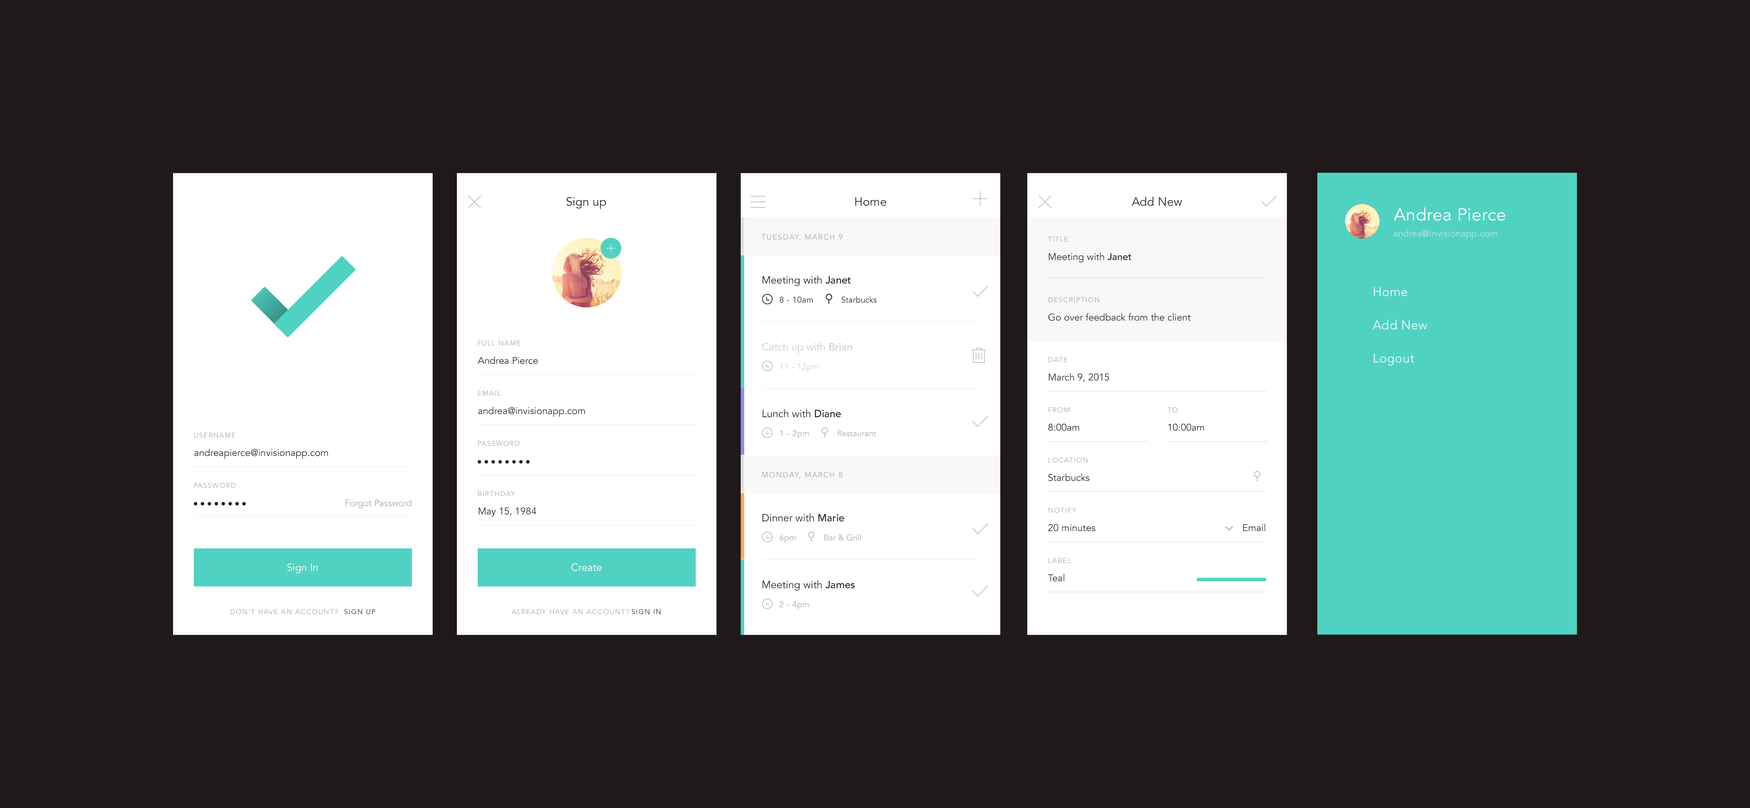
<style>
.page{position:relative;width:1750px;height:808px;background:#201919}
.page>*{position:absolute;margin:0}
.t1{font:11.8px "Avenir-Book";color:#1d1d26}
.t2{font:11.8px "Avenir-Book";letter-spacing:0.01em;color:#1d1d26}
.t3{font:17.3px "Avenir-Book";letter-spacing:0.02em;color:#ffffff}
.t4{font:9px "Avenir-Book";letter-spacing:0.02em;color:#b5e9e2}
.t5{font:7.6px "Avenir-Book";letter-spacing:0.1em;color:#a3a3a5}
.t6{font:6.9px "Avenir-Book";letter-spacing:0.1em;color:#a3a3a6}
.t7{font:9.7px "Avenir-Book";color:#1d1d26}
.t8{font:9.7px "Avenir-Medium";color:#1d1d26}
.t9{font:10.4px "Avenir-Book";color:#1d1d26}
.t10{font:10.4px "Avenir-Medium";color:#1d1d26}
.t11{font:12.5px "Avenir-Light";letter-spacing:0.03em;color:#ffffff}
.t12{font:8.3px "Avenir-Book";letter-spacing:0.03em;color:#1d1d26}
.t13{font:8.3px "Avenir-Book";color:#1d1d26}
.t14{font:6.9px "Avenir-Book";letter-spacing:0.1em;color:#a8a8aa}
.t15{font:10.4px "Avenir-Book";color:#cdcdce}
.t16{font:10.4px "Avenir-Medium";color:#cdcdce}
.t17{font:8.3px "Avenir-Book";letter-spacing:0.03em;color:#cdcdce}
.t18{font:8.3px "Avenir-Book";letter-spacing:0.03em;color:#a8a8aa}
.t19{font:8.3px "Avenir-Book";color:#a8a8aa}
.t20{font:9px "Avenir-Book";color:#a8a8aa}
.t21{font:10.4px "Avenir-Book";color:#ffffff}
.t22{font:6.9px "Avenir-Book";letter-spacing:0.1em;color:#1d1d26}
</style>
<div class="page">
<p class="t1" style="left:566px;top:197px;width:40px;height:12px">Sign up</p>
<p class="t2" style="left:855px;top:197px;width:31px;height:9px">Home</p>
<p class="t2" style="left:1132px;top:197px;width:50px;height:9px">Add New</p>
<p class="t3" style="left:1394px;top:207px;width:111px;height:14px">Andrea Pierce</p>
<p class="t4" style="left:1394px;top:230px;width:103px;height:9px">andrea@invisionapp.com</p>
<p class="t5" style="left:762px;top:234px;width:81px;height:7px">TUESDAY, MARCH 9</p>
<p class="t6" style="left:1048px;top:236px;width:20px;height:6px">TITLE</p>
<p class="t7" style="left:1049px;top:252px;width:82px;height:10px">Meeting with <span class="t8">Janet</span></p>
<p class="t9" style="left:763px;top:276px;width:88px;height:10px">Meeting with <span class="t10">Janet</span></p>
<p class="t11" style="left:1374px;top:287px;width:33px;height:9px">Home</p>
<p class="t12" style="left:780px;top:296px;width:33px;height:7px">8 - 10am</p>
<p class="t13" style="left:842px;top:296px;width:35px;height:7px">Starbucks</p>
<p class="t6" style="left:1048px;top:297px;width:51px;height:6px">DESCRIPTION</p>
<p class="t7" style="left:1048px;top:313px;width:143px;height:8px">Go over feedback from the client</p>
<p class="t11" style="left:1373px;top:320px;width:54px;height:10px">Add New</p>
<p class="t14" style="left:478px;top:340px;width:43px;height:6px">FULL NAME</p>
<p class="t15" style="left:762px;top:342px;width:90px;height:11px">Catch up with <span class="t16">Brian</span></p>
<p class="t11" style="left:1374px;top:353px;width:40px;height:13px">Logout</p>
<p class="t7" style="left:478px;top:356px;width:60px;height:8px">Andrea Pierce</p>
<p class="t17" style="left:780px;top:363px;width:39px;height:9px">11 - 12pm</p>
<p class="t14" style="left:1048px;top:357px;width:20px;height:5px">DATE</p>
<p class="t7" style="left:1049px;top:373px;width:60px;height:9px">March 9, 2015</p>
<p class="t14" style="left:478px;top:390px;width:23px;height:6px">EMAIL</p>
<p class="t7" style="left:478px;top:406px;width:107px;height:11px">andrea@invisionapp.com</p>
<p class="t9" style="left:763px;top:409px;width:78px;height:8px">Lunch with <span class="t10">Diane</span></p>
<p class="t14" style="left:1048px;top:407px;width:22px;height:6px">FROM</p>
<p class="t14" style="left:1168px;top:407px;width:10px;height:6px">TO</p>
<p class="t7" style="left:1048px;top:423px;width:31px;height:8px">8:00am</p>
<p class="t7" style="left:1168px;top:423px;width:36px;height:8px">10:00am</p>
<p class="t14" style="left:194px;top:432px;width:41px;height:6px">USERNAME</p>
<p class="t18" style="left:780px;top:430px;width:29px;height:9px">1 - 2pm</p>
<p class="t19" style="left:838px;top:430px;width:38px;height:6px">Restaurant</p>
<p class="t7" style="left:194px;top:448px;width:134px;height:11px">andreapierce@invisionapp.com</p>
<p class="t14" style="left:478px;top:441px;width:42px;height:5px">PASSWORD</p>
<p class="t14" style="left:1048px;top:457px;width:40px;height:6px">LOCATION</p>
<p class="t5" style="left:762px;top:472px;width:81px;height:7px">MONDAY, MARCH 8</p>
<p class="t7" style="left:1048px;top:473px;width:41px;height:8px">Starbucks</p>
<p class="t14" style="left:194px;top:483px;width:42px;height:5px">PASSWORD</p>
<p class="t14" style="left:478px;top:491px;width:37px;height:5px">BIRTHDAY</p>
<p class="t20" style="left:345px;top:499px;width:66px;height:9px">Forgot Password</p>
<p class="t7" style="left:479px;top:507px;width:57px;height:10px">May 15, 1984</p>
<p class="t14" style="left:1048px;top:507px;width:29px;height:6px">NOTIFY</p>
<p class="t9" style="left:763px;top:513px;width:81px;height:9px">Dinner with <span class="t10">Marie</span></p>
<p class="t19" style="left:824px;top:534px;width:37px;height:7px">Bar &amp; Grill</p>
<p class="t7" style="left:1048px;top:524px;width:47px;height:7px">20 minutes</p>
<p class="t7" style="left:1243px;top:523px;width:23px;height:8px">Email</p>
<p class="t18" style="left:780px;top:534px;width:16px;height:9px">6pm</p>
<p class="t14" style="left:1048px;top:558px;width:23px;height:5px">LABEL</p>
<p class="t21" style="left:287px;top:563px;width:31px;height:11px">Sign In</p>
<p class="t21" style="left:572px;top:563px;width:30px;height:8px">Create</p>
<p class="t9" style="left:763px;top:580px;width:92px;height:11px">Meeting with <span class="t10">James</span></p>
<p class="t7" style="left:1048px;top:574px;width:16px;height:8px">Teal</p>
<p class="t18" style="left:780px;top:601px;width:29px;height:9px">2 - 4pm</p>
<p class="t14" style="left:231px;top:609px;width:107px;height:5px">DON’T HAVE AN ACCOUNT?</p>
<p class="t22" style="left:344px;top:609px;width:31px;height:5px">SIGN UP</p>
<p class="t14" style="left:512px;top:609px;width:117px;height:5px">ALREADY HAVE AN ACCOUNT?</p>
<p class="t22" style="left:632px;top:609px;width:29px;height:5px">SIGN IN</p>
</div>
